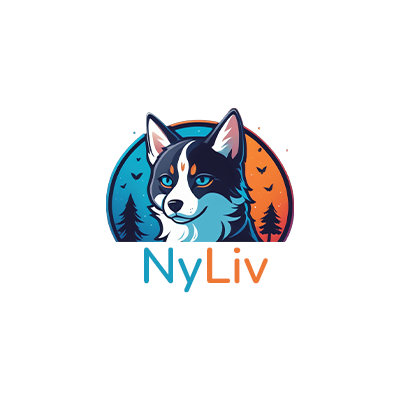
<style>
.page{position:relative;width:400px;height:400px;background:#ffffff}
.page>*{position:absolute;margin:0}
.t1{font:50px "Nunito-SemiBold";color:#ef7734}
.t2{font:50px "Nunito-SemiBold";color:#169dc0}
</style>
<div class="page">
<p class="t1" style="left:144px;top:247px;width:124px;height:46px"><span class="t2">Ny</span>Liv</p>
</div>
